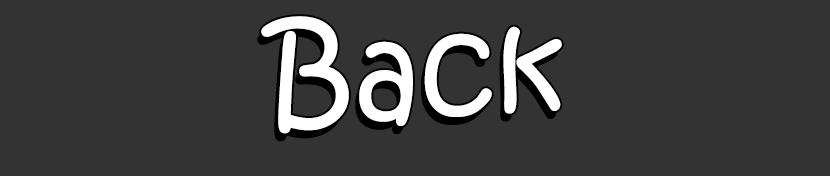
<style>
.page{position:relative;width:830px;height:176px;background:#333333}
.page>*{position:absolute;margin:0}
.t1{font:124.4px "KristenITC-Regular";color:#ffffff}
</style>
<div class="page">
<p class="t1" style="left:261px;top:16px;width:301px;height:118px">Back</p>
</div>
